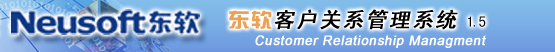
<style>
.page{position:relative;width:555px;height:52px}
.page>*{position:absolute;margin:0}
.t1{font:21px "SimHei";letter-spacing:0.075em;color:#000000;font-weight:bold;font-style:italic}
.t2{font:20px "FZZYJW--GB1-0";letter-spacing:0.025em;color:#eba254;scale:1.1 1}
.t3{font:15px "SimHei";letter-spacing:-0.1em;color:#000000}
.t4{font:13.3px "ArialMT";letter-spacing:0.025em;color:#ffffff;font-weight:bold;font-style:italic}
</style>
<div class="page">
<p class="t1" style="left:229px;top:9px;width:257px;height:21px"><span class="t2">东软</span>客户关系管理系统 <span class="t3">1.5</span></p>
<p class="t4" style="left:255px;top:35px;width:231px;height:13px">Customer Relationship Managment</p>
</div>
